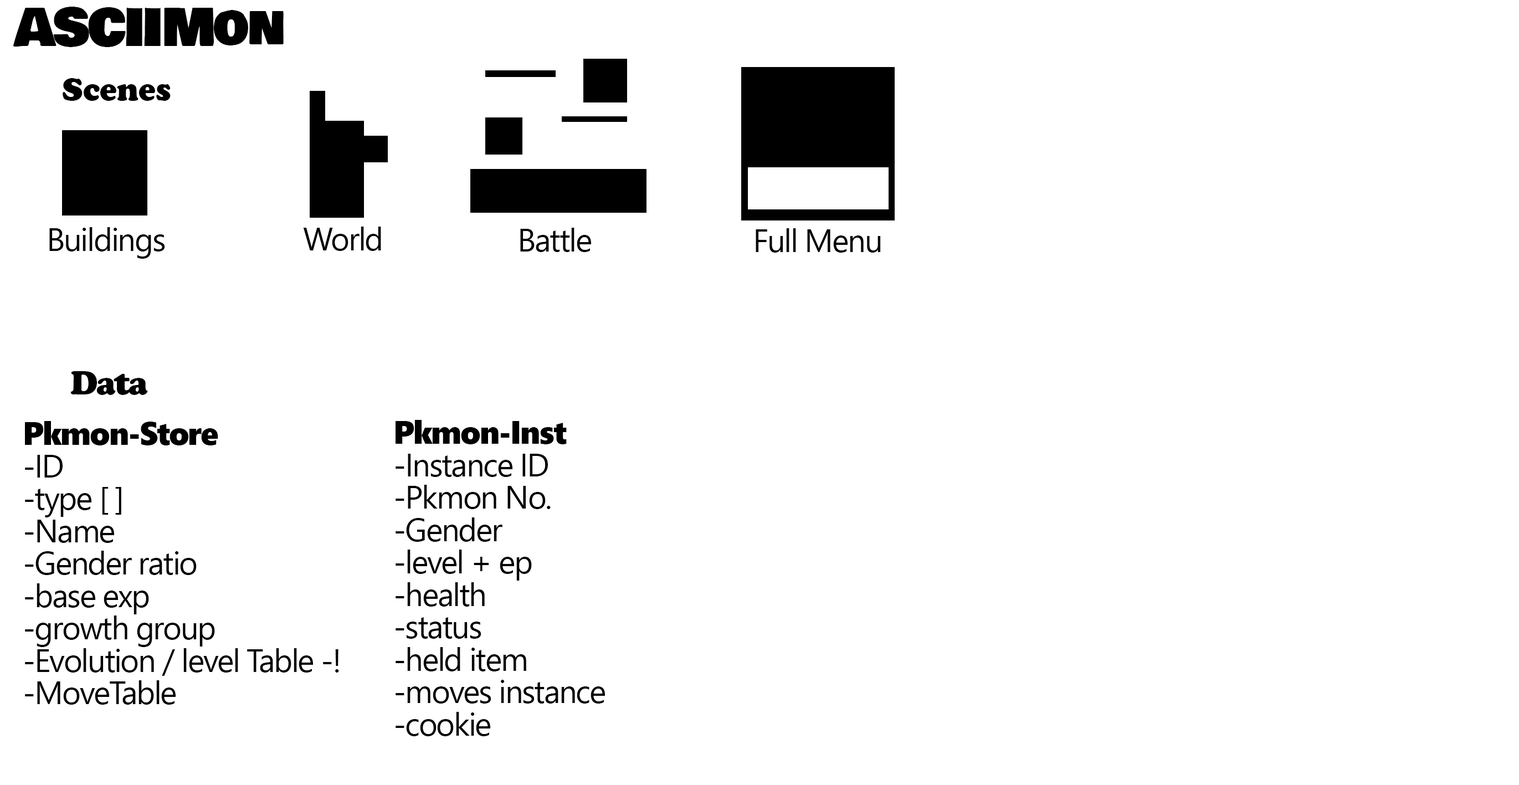
<style>
.page{position:relative;width:1519px;height:785px;background:#ffffff}
.page>*{position:absolute;margin:0}
.t1{font:50.8px "BowlbyOneSC-Regular";letter-spacing:-0.043em;color:#000000}
.t2{font:32.3px "CooperBlack";letter-spacing:-0.003em;color:#000000}
.t3{font:32.3px "CooperBlackStd";letter-spacing:-0.043em;color:#000000}
.t4{font:32.3px/32.4px "SegoeUI";letter-spacing:-0.043em;color:#000000}
.t5{font:32.3px/32.4px "SegoeUIBlack";letter-spacing:-0.043em;color:#000000}
</style>
<div class="page">
<p class="t1" style="left:13px;top:7px;width:271px;height:40px">ASCIIMon</p>
<p class="t2" style="left:63px;top:78px;width:108px;height:23px">Scenes</p>
<p class="t3" style="left:70px;top:371px;width:78px;height:24px">Data</p>
<p class="t4" style="left:25px;top:421px;width:314px;height:284px"><span class="t5">Pkmon-Store<br></span>-ID<br>-type [ ]<br>-Name<br>-Gender ratio<br>-base exp<br>-growth group<br>-Evolution / level Table -!<br>-MoveTable</p>
<p class="t4" style="left:396px;top:420px;width:209px;height:316px"><span class="t5">Pkmon-Inst<br></span>-Instance ID<br>-Pkmon No.<br>-Gender<br>-level + ep<br>-health<br>-status<br>-held item<br>-moves instance<br>-cookie</p>
</div>
